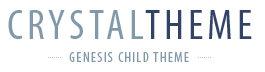
<style>
.page{position:relative;width:265px;height:72px;background:#ffffff}
.page>*{position:absolute;margin:0}
.t1{font:42.5px "MyriadPro-Cond";letter-spacing:0.1em;color:#8199a9;text-transform:uppercase}
.t2{font:42.5px "MyriadPro-Cond";letter-spacing:0.1em;color:#334366;text-transform:uppercase}
.t3{font:14px "MyriadPro-Cond";letter-spacing:0.1em;color:#8199a9;text-transform:uppercase}
</style>
<div class="page">
<p class="t1" style="left:8px;top:10px;width:244px;height:29px">crystal<span class="t2">theme</span></p>
<p class="t3" style="left:69px;top:52px;width:120px;height:10px">Genesis Child Theme</p>
</div>
